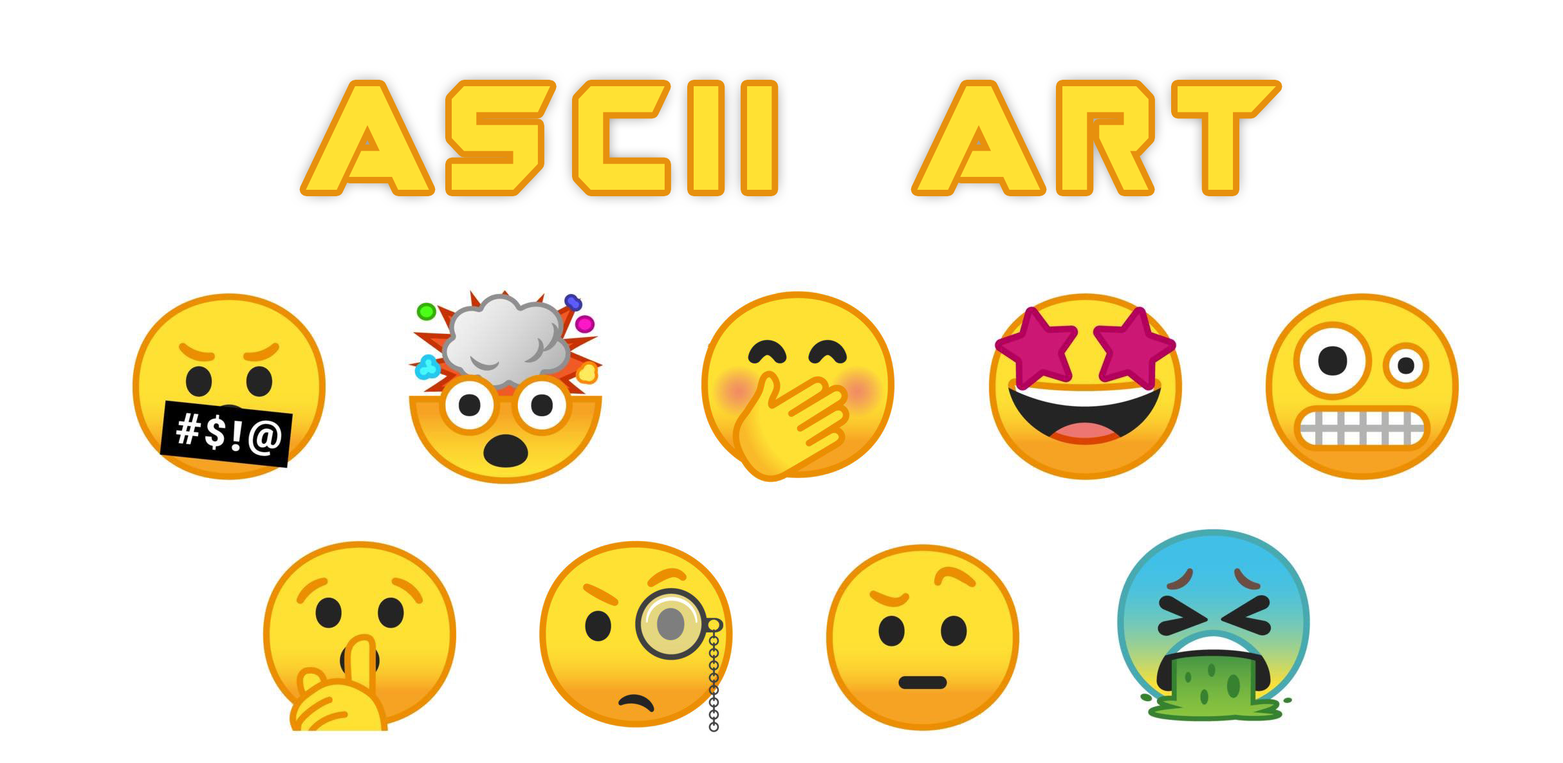
<style>
.page{position:relative;width:1563px;height:763px;background:#ffffff}
.page>*{position:absolute;margin:0}
.t1{font:103.6px "Guardians";letter-spacing:0.18em;color:#ffe133;scale:0.95 1}
</style>
<div class="page">
<p class="t1" style="left:306px;top:86px;width:970px;height:104px">ASCII ART</p>
</div>
